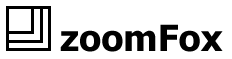
<style>
.page{position:relative;width:232px;height:59px;background:#ffffff}
.page>*{position:absolute;margin:0}
.t1{font:36px "Tahoma-Bold";color:#000000}
</style>
<div class="page">
<p class="t1" style="left:60px;top:24px;width:163px;height:28px">zoomFox</p>
</div>
